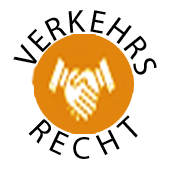
<style>
.page{position:relative;width:170px;height:170px;background:#ffffff}
.page>*{position:absolute;margin:0}
.t1{font:32px "MyriadPro-Regular";color:#000000}
.t2{font:31.2px "MyriadPro-Regular";color:#000000}
</style>
<div class="page">
<p class="t1" style="left:44px;top:17px;width:23px;height:24px;rotate:-27deg">R</p>
<p class="t1" style="left:68px;top:10px;width:18px;height:23px;rotate:-5deg">K</p>
<p class="t1" style="left:90px;top:10px;width:16px;height:24px;rotate:10deg">E</p>
<p class="t1" style="left:106px;top:17px;width:26px;height:27px;rotate:37deg">H</p>
<p class="t1" style="left:27px;top:28px;width:25px;height:25px;rotate:-46deg">E</p>
<p class="t1" style="left:123px;top:35px;width:24px;height:25px;rotate:51deg">R</p>
<p class="t1" style="left:13px;top:43px;width:24px;height:21px;rotate:-61deg">V</p>
<p class="t1" style="left:133px;top:58px;width:24px;height:17px;rotate:68deg">S</p>
<p class="t1" style="left:28px;top:118px;width:23px;height:26px;rotate:46deg">R</p>
<p class="t1" style="left:116px;top:115px;width:22px;height:23px;rotate:-43deg">T</p>
<p class="t1" style="left:49px;top:130px;width:20px;height:26px;rotate:25deg">E</p>
<p class="t1" style="left:73px;top:137px;width:17px;height:22px">C</p>
<p class="t2" style="left:95px;top:129px;width:25px;height:26px;rotate:-24deg">H</p>
</div>
